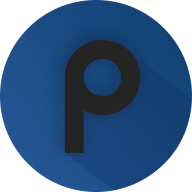
<style>
.page{position:relative;width:192px;height:192px;background:#ffffff}
.page>*{position:absolute;margin:0}
.t1{font:141px "Moderna";color:#242424}
</style>
<div class="page">
<p class="t1" style="left:64px;top:40px;width:77px;height:113px">p</p>
</div>
